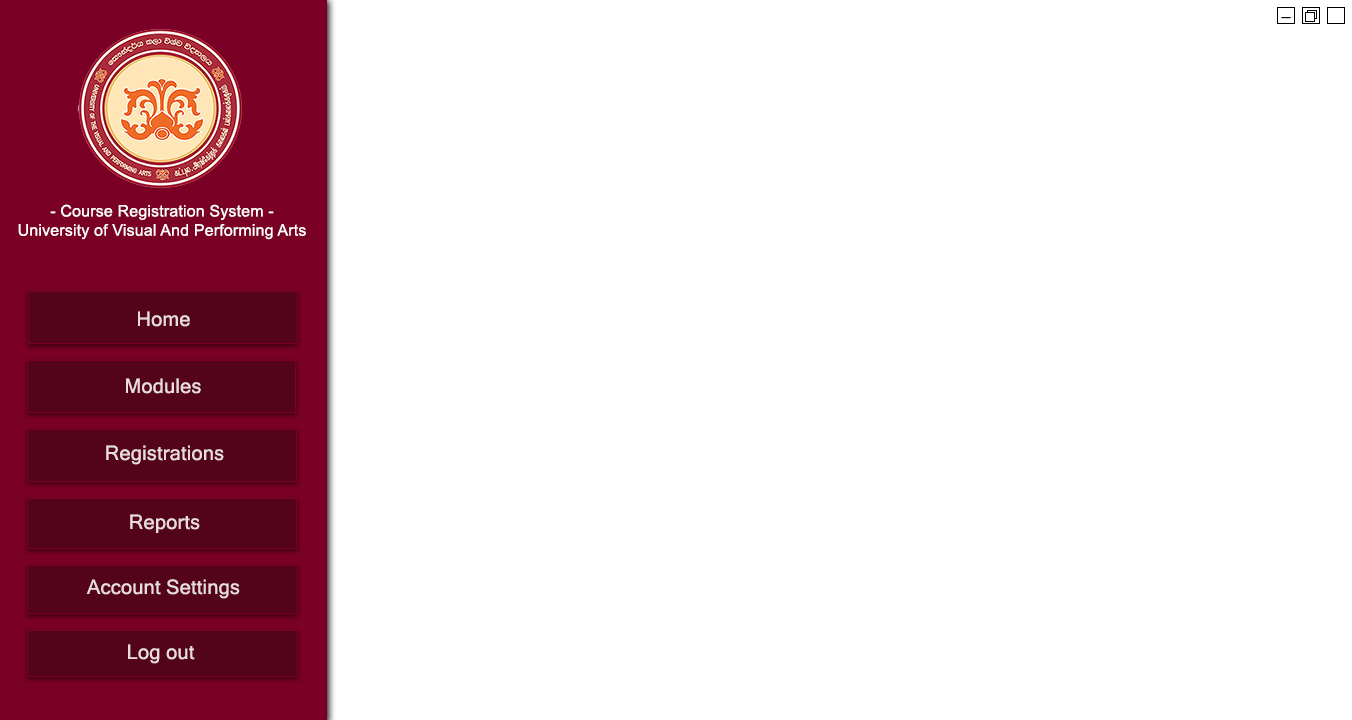
<style>
.page{position:relative;width:1352px;height:720px;background:#ffffff}
.page>*{position:absolute;margin:0}
.t1{font:16px "ArialMT";letter-spacing:0.01em;color:#060606}
.t2{font:16px "ArialMT";letter-spacing:0.01em;color:#ffffff}
.t3{font:20px "MicrosoftSansSerif";letter-spacing:0.01em;color:#eadcdc}
</style>
<div class="page">
<p class="t1" style="left:1281px;top:17px;width:10px;height:2px">_</p>
<p class="t2" style="left:18px;top:204px;width:288px;height:36px;text-align:center">- Course Registration System -<br>University of Visual And Performing Arts</p>
<p class="t3" style="left:138px;top:311px;width:52px;height:16px">Home</p>
<p class="t3" style="left:126px;top:378px;width:75px;height:16px">Modules</p>
<p class="t3" style="left:106px;top:445px;width:118px;height:20px">Registrations</p>
<p class="t3" style="left:130px;top:514px;width:70px;height:19px">Reports</p>
<p class="t3" style="left:86px;top:579px;width:154px;height:20px">Account Settings</p>
<p class="t3" style="left:128px;top:644px;width:67px;height:20px">Log out</p>
</div>
